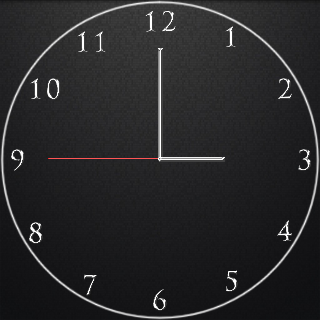
<style>
.page{position:relative;width:320px;height:320px}
.page>*{position:absolute;margin:0}
.t1{font:26.8px "TrajanPro-Bold";letter-spacing:0.1em;color:#ffffff;scale:0.95 1}
.t2{font:26.8px "TrajanPro-Bold";letter-spacing:0.1em;scale:0.95 1}
</style>
<div class="page">
<p class="t1" style="left:145px;top:11px;width:31px;height:21px">12</p>
<p class="t1" style="left:225px;top:26px;width:11px;height:21px">1</p>
<p class="t2" style="left:77px;top:31px;width:29px;height:21px">11</p>
<p class="t1" style="left:30px;top:78px;width:31px;height:22px">10</p>
<p class="t2" style="left:278px;top:78px;width:14px;height:21px">2</p>
<p class="t2" style="left:11px;top:149px;width:14px;height:22px">9</p>
<p class="t2" style="left:298px;top:149px;width:13px;height:22px">3</p>
<p class="t1" style="left:29px;top:222px;width:14px;height:22px">8</p>
<p class="t1" style="left:277px;top:220px;width:15px;height:21px">4</p>
<p class="t2" style="left:226px;top:270px;width:12px;height:22px">5</p>
<p class="t2" style="left:153px;top:289px;width:14px;height:22px">6</p>
</div>
